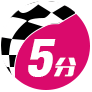
<style>
.page{position:relative;width:92px;height:92px;background:#ffffff}
.page>*{position:absolute;margin:0}
.t1{font:50.2px "Swiss721BT-BlackCondensed";letter-spacing:-0.075em;color:#ffffff;font-style:italic;scale:1.05 1}
.t2{font:19.8px "MFLiHei_Noncommercial-Regular";letter-spacing:-0.075em;color:#ffffff;font-style:italic;scale:1.11 1}
</style>
<div class="page">
<p class="t1" style="left:28px;top:39px;width:28px;height:38px">5</p>
<p class="t2" style="left:54px;top:57px;width:22px;height:20px">分</p>
</div>
